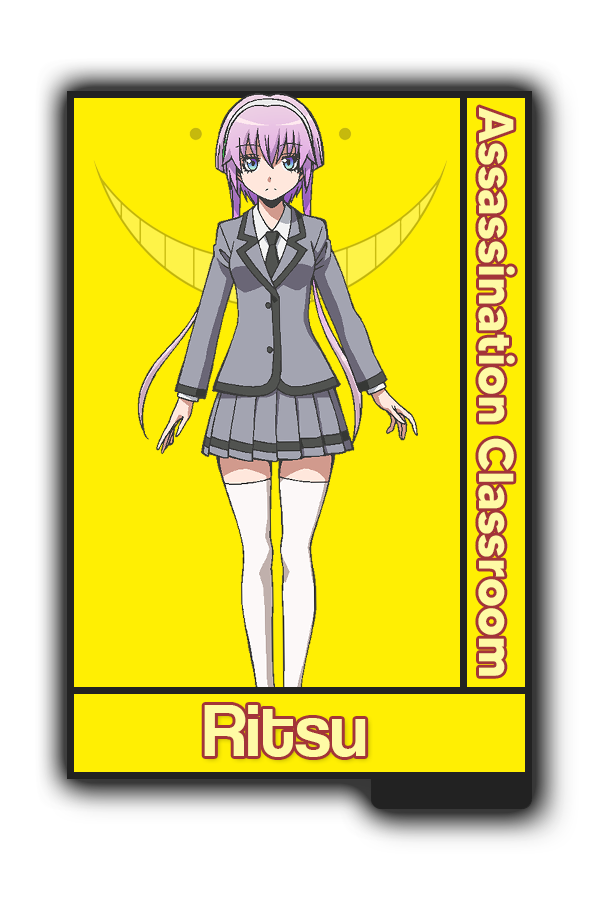
<style>
.page{position:relative;width:600px;height:900px;background:#ffef03}
.page>*{position:absolute;margin:0}
.t1{font:48.8px "MADETOMMY-Bold";color:#fefaa5}
.t2{font:75px "CoolveticaRg-Regular";color:#fefaa5}
</style>
<div class="page">
<p class="t1" style="left:478px;top:107px;width:37px;height:569px;rotate:90deg">Assassination Classroom</p>
<p class="t2" style="left:204px;top:705px;width:162px;height:52px">Ritsu</p>
</div>
